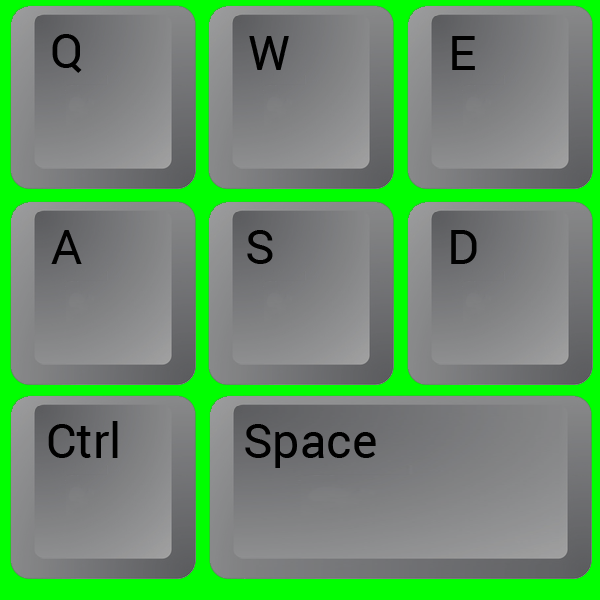
<style>
.page{position:relative;width:600px;height:600px}
.page>*{position:absolute;margin:0}
.t1{font:48px "Roboto-Regular";color:#000000}
.t2{font:48px "Roboto-Regular";color:#010101}
</style>
<div class="page">
<p class="t1" style="left:52px;top:34px;width:30px;height:39px">Q</p>
<p class="t1" style="left:249px;top:36px;width:40px;height:34px">W</p>
<p class="t1" style="left:452px;top:36px;width:23px;height:34px">E</p>
<p class="t2" style="left:51px;top:230px;width:31px;height:34px">A</p>
<p class="t2" style="left:247px;top:230px;width:26px;height:34px">S</p>
<p class="t2" style="left:451px;top:230px;width:26px;height:34px">D</p>
<p class="t1" style="left:48px;top:421px;width:70px;height:37px">Ctrl</p>
<p class="t1" style="left:245px;top:424px;width:131px;height:44px">Space</p>
</div>
